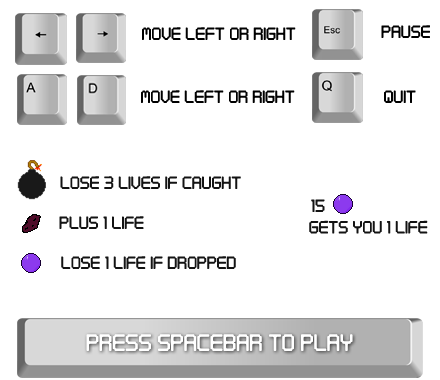
<style>
.page{position:relative;width:440px;height:380px;background:#ffffff}
.page>*{position:absolute;margin:0}
.t1{font:18px "Digitaltech";color:#000000}
.t2{font:18px "Digitaltech";color:#131313}
.t3{font:24px "Digitaltech";color:#ffffff}
</style>
<div class="page">
<p class="t1" style="left:142px;top:27px;width:154px;height:13px">Move left OR right</p>
<p class="t1" style="left:381px;top:25px;width:49px;height:13px">pause</p>
<p class="t1" style="left:141px;top:90px;width:154px;height:13px">Move left or right</p>
<p class="t1" style="left:384px;top:90px;width:32px;height:13px">Quit</p>
<p class="t2" style="left:60px;top:176px;width:181px;height:13px">Lose 3 lives if caught</p>
<p class="t2" style="left:309px;top:199px;width:119px;height:35px;text-align:right">15                       <br> gets you 1 life</p>
<p class="t2" style="left:59px;top:216px;width:85px;height:13px">Plus 1 life</p>
<p class="t2" style="left:61px;top:256px;width:175px;height:13px">LOSE 1 life if DROPPED</p>
<p class="t3" style="left:86px;top:334px;width:267px;height:17px">Press spacebar to play</p>
</div>
